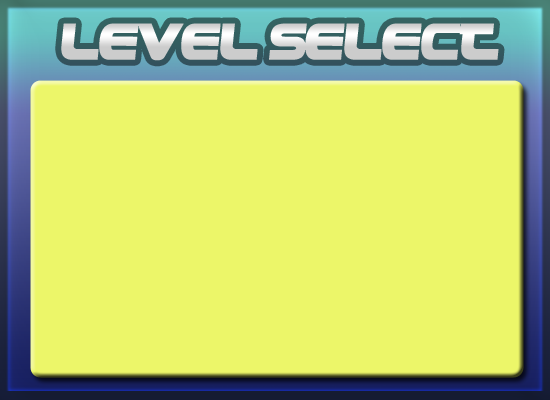
<style>
.page{position:relative;width:550px;height:400px;background:#ecf669}
.page>*{position:absolute;margin:0}
.t1{font:52px "!PEPSI!";color:#d4d4d4;font-weight:bold}
</style>
<div class="page">
<p class="t1" style="left:61px;top:23px;width:438px;height:38px">level select</p>
</div>
